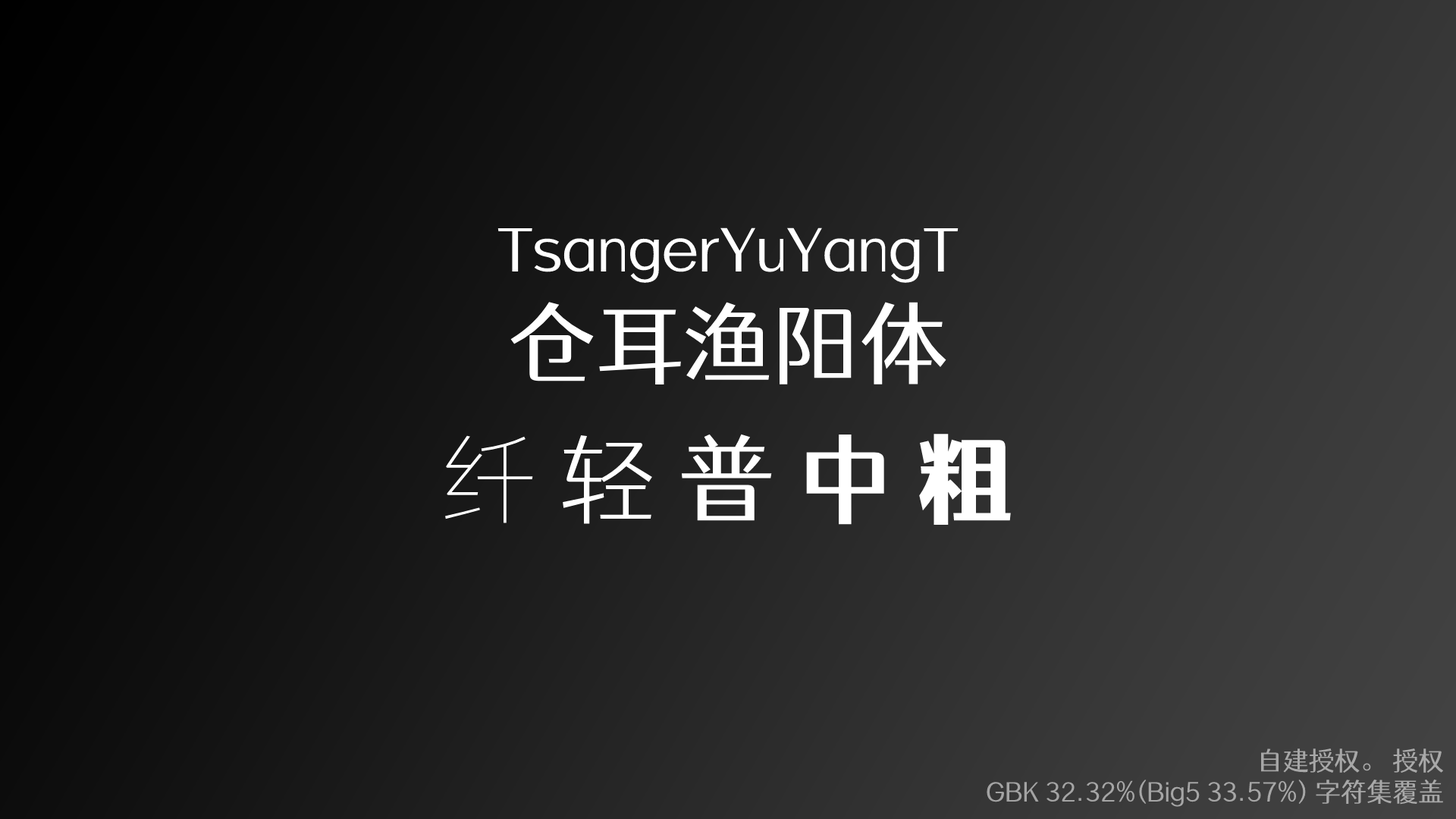
<style>
.page{position:relative;width:1456px;height:819px}
.page>*{position:absolute;margin:0}
.t1{font:57.6px "TsangerYuYangT-W03";color:#ffffff}
.t2{font:88px "TsangerYuYangT-W03";color:#ffffff}
.t3{font:95.5px "TsangerYuYangT-W01";color:#ffffff}
.t4{font:95.5px "TsangerYuYangT-W02";color:#ffffff}
.t5{font:95.5px "TsangerYuYangT-W03";color:#ffffff}
.t6{font:95.5px "TsangerYuYangT-W04";color:#ffffff}
.t7{font:95.5px "TsangerYuYangT-W05";color:#ffffff}
.t8{font:25.8px "TsangerYuYangT-W03";color:#a7a7a7}
</style>
<div class="page">
<p class="t1" style="left:497px;top:227px;width:462px;height:158px;text-align:center">TsangerYuYangT<br><span class="t2">仓耳渔阳体</span></p>
<p class="t3" style="left:445px;top:434px;width:566px;height:91px">纤 <span class="t4">轻 </span><span class="t5">普 </span><span class="t6">中 </span><span class="t7">粗</span></p>
<p class="t8" style="left:987px;top:748px;width:457px;height:59px;text-align:right">自建授权。 授权<br> GBK 32.32%(Big5 33.57%) 字符集覆盖</p>
</div>
